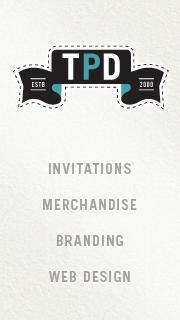
<style>
.page{position:relative;width:180px;height:320px}
.page>*{position:absolute;margin:0}
.t1{font:14.1px/36px "TradeGothic-Bold";letter-spacing:0.075em;color:#a3a29c;text-transform:uppercase}
</style>
<div class="page">
<p class="t1" style="left:43px;top:163px;width:94px;height:119px;text-align:center">Invitations<br>Merchandise<br>Branding<br>Web Design</p>
</div>
